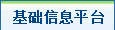
<style>
.page{position:relative;width:115px;height:30px;background:#ecf5fa}
.page>*{position:absolute;margin:0}
.t1{font:14px "SimSun";letter-spacing:0.025em;color:#004581;font-weight:bold}
</style>
<div class="page">
<p class="t1" style="left:13px;top:10px;width:91px;height:14px">基础信息平台</p>
</div>
